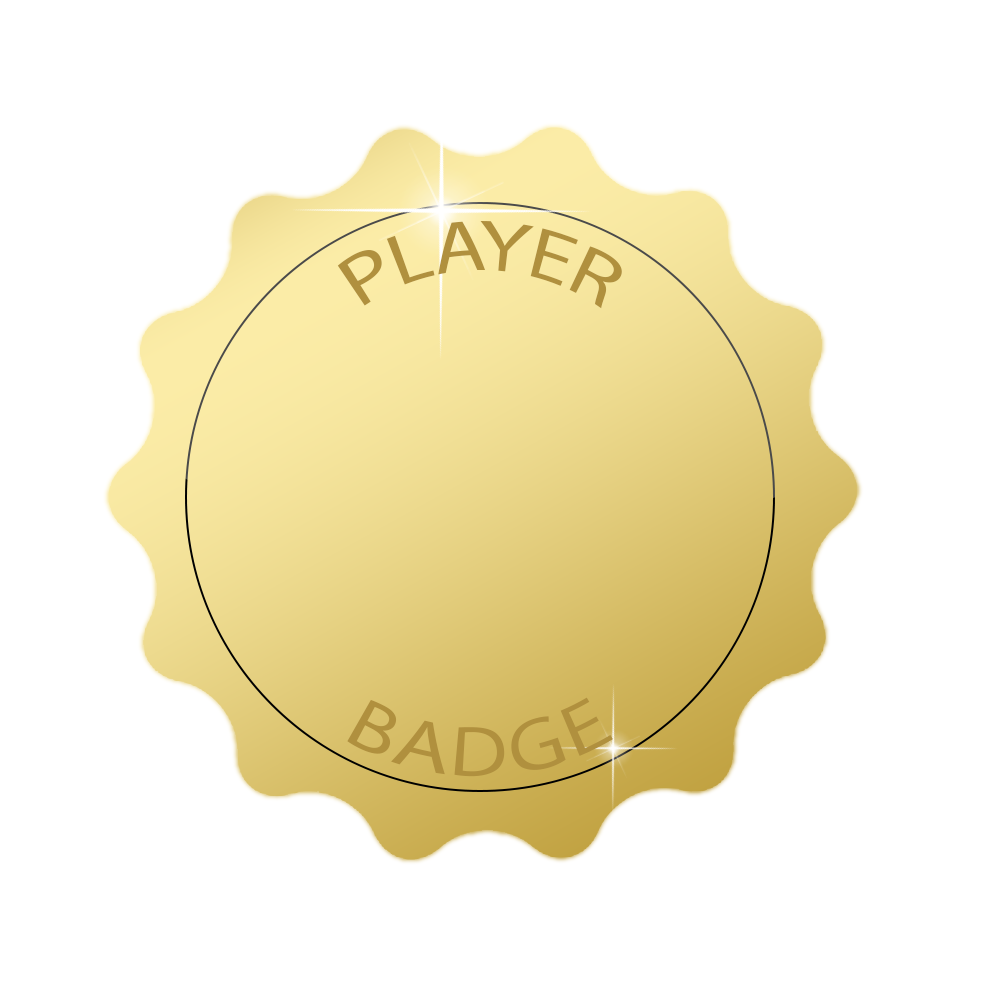
<style>
.page{position:relative;width:1000px;height:1000px;background:#ffffff}
.page>*{position:absolute;margin:0}
.t1{font:72px "MyriadPro-Regular";color:#b0903e}
</style>
<div class="page">
<p class="t1" style="left:337px;top:221px;width:285px;height:88px">PLAYER</p>
<p class="t1" style="left:347px;top:697px;width:266px;height:80px">BADGE</p>
</div>
